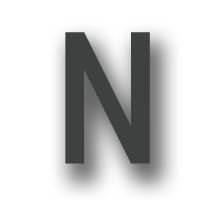
<style>
.page{position:relative;width:215px;height:200px;background:#ffffff}
.page>*{position:absolute;margin:0}
.t1{font:150px "Manteka";color:#3f4040}
</style>
<div class="page">
<p class="t1" style="left:65px;top:32px;width:85px;height:132px">N</p>
</div>
